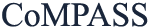
<style>
.page{position:relative;width:150px;height:28px;background:#ffffff}
.page>*{position:absolute;margin:0}
.t1{font:34px "TimesNewRomanPSMT";color:#19253a}
</style>
<div class="page">
<p class="t1" style="left:2px;top:2px;width:146px;height:25px">CoMPASS</p>
</div>
